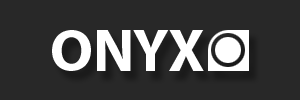
<style>
.page{position:relative;width:300px;height:100px;background:#282828}
.page>*{position:absolute;margin:0}
.t1{font:60px "MyriadPro-Bold";color:#ffffff}
</style>
<div class="page">
<p class="t1" style="left:52px;top:30px;width:152px;height:41px">ONYX</p>
</div>
